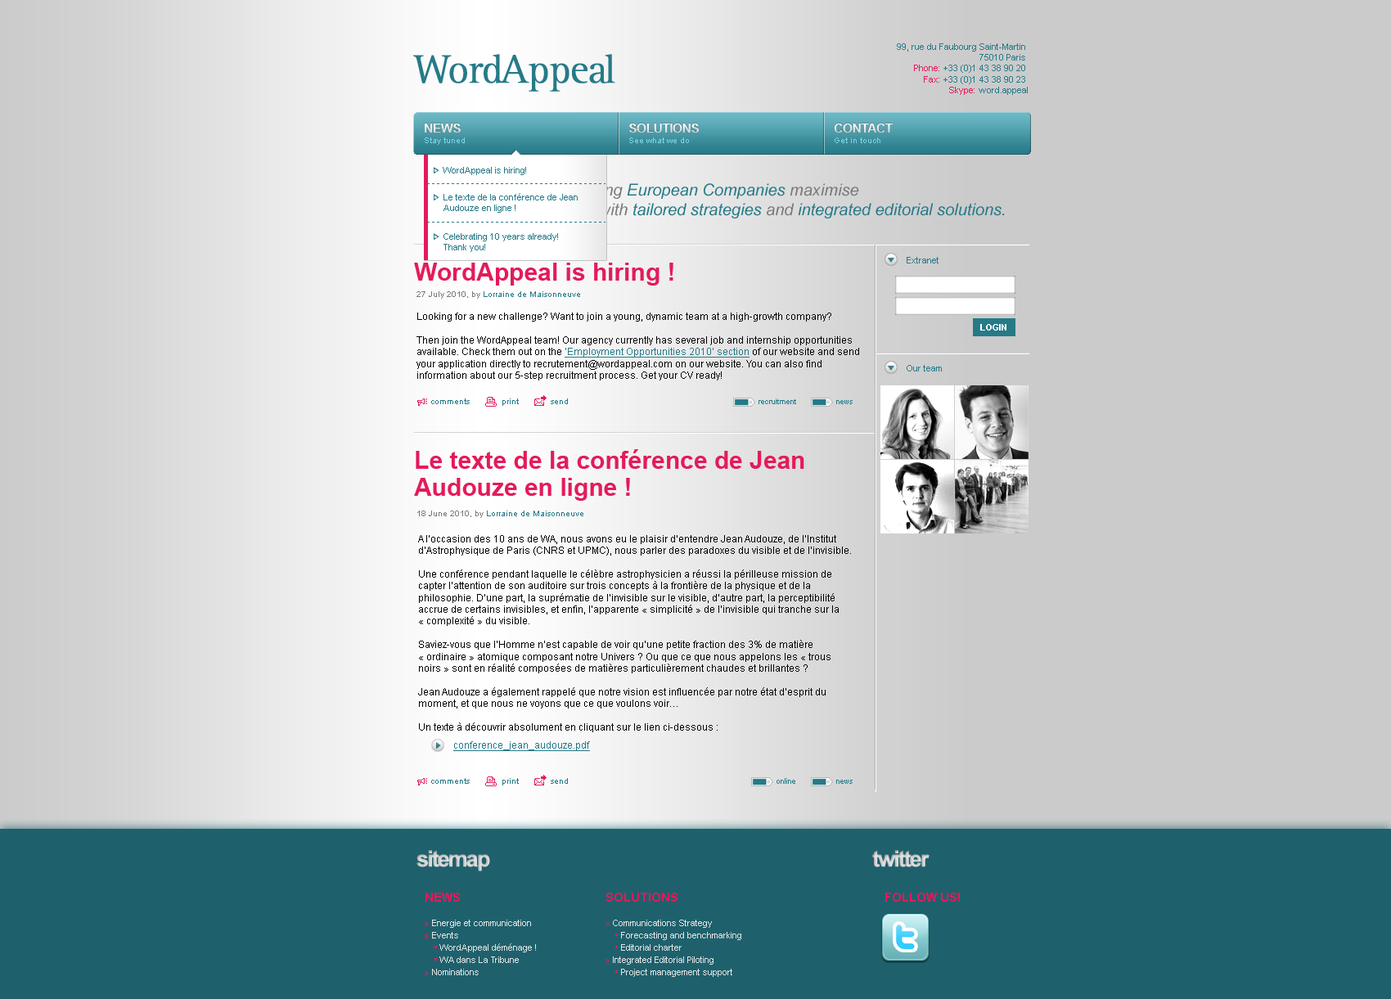
<style>
.page{position:relative;width:1391px;height:999px;background:#cbcbcb}
.page>*{position:absolute;margin:0}
.t1{font:9px "ArialMT";color:#267a88}
.t2{font:9px "ArialMT";color:#e31b5a}
.t3{font:13.1px "Arial-BoldMT";letter-spacing:-0.05em}
.t4{font:8.2px "ArialMT";color:#7cd7e6}
.t5{font:16.4px "Arial-ItalicMT";color:#797979}
.t6{font:16.4px "Arial-ItalicMT";color:#e31b5a}
.t7{font:16.4px "Arial-ItalicMT";color:#267a88}
.t8{font:16.4px "Arial-ItalicMT";color:#4f4f4f}
.t9{font:24.5px "Arial-BoldMT";color:#e31b5a}
.t10{font:8.2px "ArialMT";color:#267a88}
.t11{font:8.2px "ArialMT";color:#797979}
.t12{font:9.8px "ArialMT";color:#000000}
.t13{font:9.8px "ArialMT";color:#267a88;text-decoration:underline}
.t14{font:9px "Arial-BoldMT";color:#ffffff}
.t15{font:7.4px "ArialMT";color:#267a88}
.t16{font:24.5px/27px "Arial-BoldMT";color:#e31b5a}
.t17{font:22.1px "Arial-BoldMT";letter-spacing:-0.1em;color:#e3e3e3;font-weight:bold}
.t18{font:9px/12.3px "ArialMT";color:#e3e3e3}
.t19{font:12.3px/12.3px "Arial-BoldMT";color:#e31b5a}
.t20{font:9px/12.3px "ArialMT";color:#e31b5a}
.t21{font:12.3px "Arial-BoldMT";color:#e31b5a}
</style>
<div class="page">
<p class="t1" style="left:897px;top:43px;width:131px;height:52px;text-align:right">99, rue du Faubourg Saint-Martin <br>75010 Paris <br><span class="t2">Phone: </span>+33 (0)1 43 38 90 20 <br><span class="t2">Fax: </span>+33 (0)1 43 38 90 23 <br><span class="t2">Skype: </span>word.appeal</p>
<p class="t3" style="left:425px;top:123px;width:36px;height:10px">NEWS</p>
<p class="t3" style="left:425px;top:123px;width:36px;height:10px">NEWS</p>
<p class="t3" style="left:628px;top:123px;width:72px;height:10px">SOLUTIONS</p>
<p class="t3" style="left:834px;top:123px;width:59px;height:10px">CONTACT</p>
<p class="t4" style="left:425px;top:137px;width:40px;height:8px">Stay tuned</p>
<p class="t4" style="left:425px;top:137px;width:40px;height:8px">Stay tuned</p>
<p class="t4" style="left:629px;top:137px;width:60px;height:6px">See what we do</p>
<p class="t4" style="left:835px;top:137px;width:45px;height:6px">Get in touch</p>
<p class="t1" style="left:443px;top:167px;width:83px;height:8px">WordAppeal is hiring!</p>
<p class="t5" style="left:440px;top:183px;width:565px;height:35px"><span class="t6">WordAppeal </span>help leading <span class="t7">European Companies </span>maximise<br>their communications with <span class="t7">tailored strategies </span>and<span class="t7"> integrated editorial solutions</span><span class="t8">.</span></p>
<p class="t1" style="left:443px;top:193px;width:135px;height:20px">Le texte de la conférence de Jean<br>Audouze en ligne !</p>
<p class="t1" style="left:443px;top:233px;width:115px;height:19px">Celebrating 10 years already!<br>Thank you!</p>
<p class="t1" style="left:907px;top:257px;width:31px;height:6px">Extranet</p>
<p class="t9" style="left:414px;top:263px;width:259px;height:23px">WordAppeal is hiring !</p>
<p class="t10" style="left:416px;top:291px;width:164px;height:8px"><span class="t11">27 July 2010, by </span>Lorraine de Maisonneuve</p>
<p class="t12" style="left:416px;top:313px;width:443px;height:67px">Looking for a new challenge? Want to join a young, dynamic team at a high-growth company?<br><br>Then join the WordAppeal team! Our agency currently has several job and internship opportunities<br>available. Check them out on the <span class="t13">’Employment Opportunities 2010’ section</span> of our website and send<br>your application directly to recrutement@wordappeal.com on our website. You can also find<br>information about our 5-step recruitment process. Get your CV ready!</p>
<p class="t14" style="left:980px;top:324px;width:26px;height:7px">LOGIN</p>
<p class="t1" style="left:907px;top:365px;width:35px;height:6px">Our team</p>
<p class="t10" style="left:431px;top:398px;width:39px;height:6px">comments</p>
<p class="t10" style="left:502px;top:398px;width:17px;height:8px">print</p>
<p class="t10" style="left:551px;top:398px;width:17px;height:6px">send</p>
<p class="t15" style="left:758px;top:398px;width:38px;height:6px">recruitment</p>
<p class="t15" style="left:836px;top:400px;width:17px;height:4px">news</p>
<p class="t16" style="left:414px;top:449px;width:390px;height:52px">Le texte de la conférence de Jean<br>Audouze en ligne !</p>
<p class="t10" style="left:417px;top:511px;width:166px;height:7px"><span class="t11">18 June 2010, by </span>Lorraine de Maisonneuve</p>
<p class="t12" style="left:418px;top:535px;width:433px;height:197px">A l’occasion des 10 ans de WA, nous avons eu le plaisir d’entendre Jean Audouze, de l’Institut d’Astrophysique de Paris (CNRS et UPMC), nous parler des paradoxes du visible et de l’invisible.<br><br>Une conférence pendant laquelle le célèbre astrophysicien a réussi la périlleuse mission de capter l’attention de son auditoire sur trois concepts à la frontière de la physique et de la philosophie. D’une part, la suprématie de l’invisible sur le visible, d’autre part, la perceptibilité accrue de certains invisibles, et enfin, l’apparente « simplicité » de l’invisible qui tranche sur la<br>« complexité » du visible.<br><br>Saviez-vous que l’Homme n’est capable de voir qu’une petite fraction des 3% de matière<br>« ordinaire » atomique composant notre Univers ? Ou que ce que nous appelons les « trous<br>noirs » sont en réalité composées de matières particulièrement chaudes et brillantes ?<br><br>Jean Audouze a également rappelé que notre vision est influencée par notre état d’esprit du moment, et que nous ne voyons que ce que voulons voir…<br><br>Un texte à découvrir absolument en cliquant sur le lien ci-dessous :</p>
<p class="t13" style="left:453px;top:741px;width:137px;height:10px">conference_jean_audouze.pdf</p>
<p class="t10" style="left:431px;top:778px;width:39px;height:6px">comments</p>
<p class="t10" style="left:502px;top:778px;width:17px;height:7px">print</p>
<p class="t10" style="left:551px;top:778px;width:17px;height:6px">send</p>
<p class="t15" style="left:776px;top:778px;width:19px;height:6px">online</p>
<p class="t15" style="left:836px;top:780px;width:17px;height:4px">news</p>
<p class="t17" style="left:416px;top:850px;width:74px;height:21px">sitemap</p>
<p class="t17" style="left:872px;top:850px;width:57px;height:17px">twitter</p>
<p class="t18" style="left:425px;top:893px;width:111px;height:82px"><span class="t19">NEWS<br></span><span class="t20"><br>» </span>Energie et communication<br><span class="t20">»</span> Events<br>    <span class="t20">•</span> WordAppeal déménage !<br>    <span class="t20">•</span> WA dans La Tribune<br><span class="t20">»</span> Nominations</p>
<p class="t18" style="left:605px;top:893px;width:136px;height:84px"><span class="t19">SOLUTIONS<br></span><span class="t20"><br>» </span>Communications Strategy<br>    <span class="t20">•</span> Forecasting and benchmarking<br>    <span class="t20">•</span> Editorial charter<br><span class="t20">»</span> Integrated Editorial Piloting<br>    <span class="t20">•</span> Project management support</p>
<p class="t21" style="left:885px;top:893px;width:75px;height:9px">FOLLOW US!</p>
</div>
